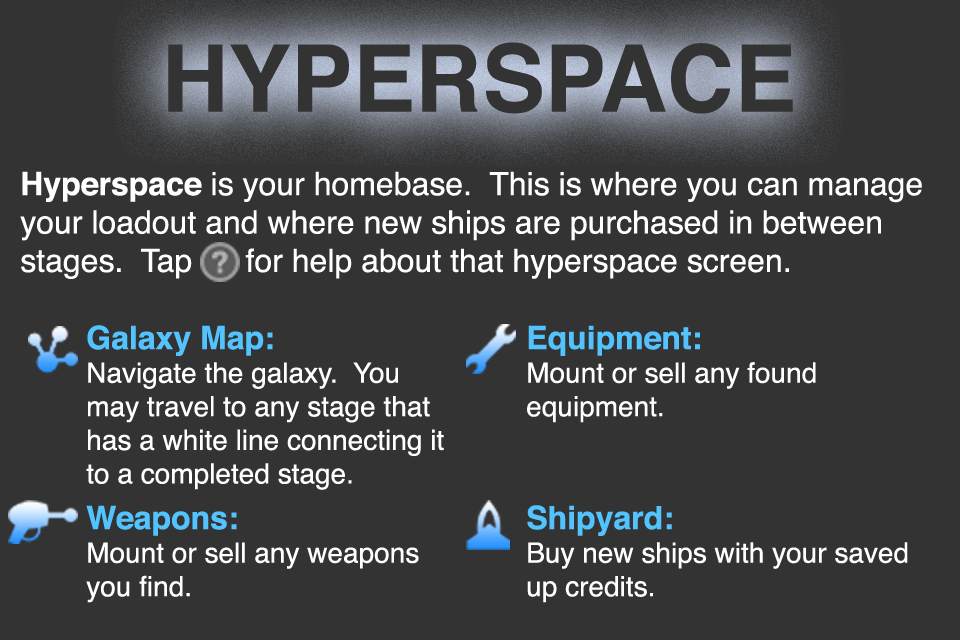
<style>
.page{position:relative;width:960px;height:640px;background:#333333}
.page>*{position:absolute;margin:0}
.t1{font:93.1px "Helvetica-Bold";color:#333333}
.t2{font:32px "Helvetica";color:#ffffff}
.t3{font:32px "Helvetica-Bold";color:#ffffff}
.t4{font:28px "Helvetica";color:#ffffff}
.t5{font:32px "Helvetica-Bold";color:#52c3fe}
</style>
<div class="page">
<p class="t1" style="left:168px;top:42px;width:625px;height:72px">HYPERSPACE</p>
<p class="t2" style="left:20px;top:171px;width:902px;height:108px"><span class="t3">Hyperspace</span> is your homebase.  This is where you can manage your loadout and where new ships are purchased in between stages.  Tap      for help about that hyperspace screen.</p>
<p class="t4" style="left:86px;top:325px;width:358px;height:165px"><span class="t5">Galaxy Map:<br></span>Navigate the galaxy.  You may travel to any stage that has a white line connecting it to a completed stage.</p>
<p class="t4" style="left:527px;top:325px;width:289px;height:98px"><span class="t5">Equipment:<br></span>Mount or sell any found equipment.</p>
<p class="t4" style="left:86px;top:505px;width:333px;height:98px"><span class="t5">Weapons:<br></span>Mount or sell any weapons you find.</p>
<p class="t4" style="left:527px;top:505px;width:381px;height:98px"><span class="t5">Shipyard:<br></span>Buy new ships with your saved up credits.</p>
</div>
